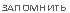
<style>
.page{position:relative;width:70px;height:13px;background:#ffffff}
.page>*{position:absolute;margin:0}
.t1{font:9.8px "Calibri";color:#5c5c5c;scale:1.2 1}
</style>
<div class="page">
<p class="t1" style="left:2px;top:5px;width:64px;height:6px">ЗАПОМНИТЬ</p>
</div>
